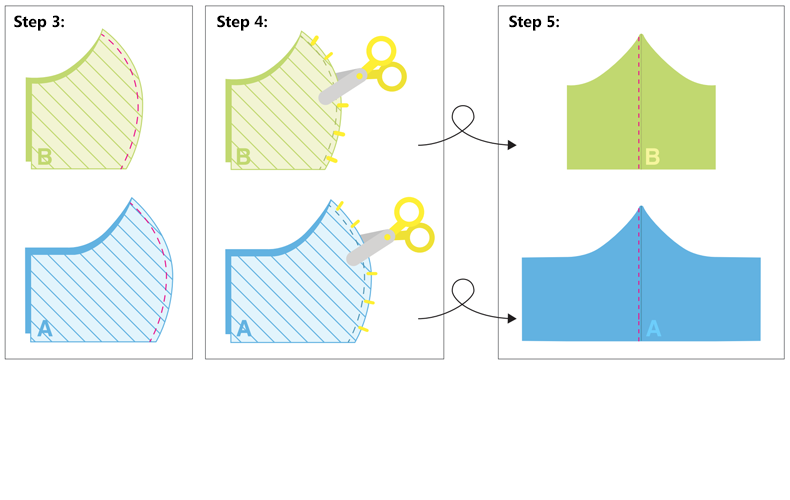
<style>
.page{position:relative;width:790px;height:500px;background:#ffffff}
.page>*{position:absolute;margin:0}
.t1{font:16px "SegoeUI-Bold";color:#000000}
</style>
<div class="page">
<p class="t1" style="left:14px;top:15px;width:50px;height:16px">Step 3:</p>
<p class="t1" style="left:217px;top:15px;width:50px;height:16px">Step 4:</p>
<p class="t1" style="left:509px;top:15px;width:50px;height:16px">Step 5:</p>
</div>
